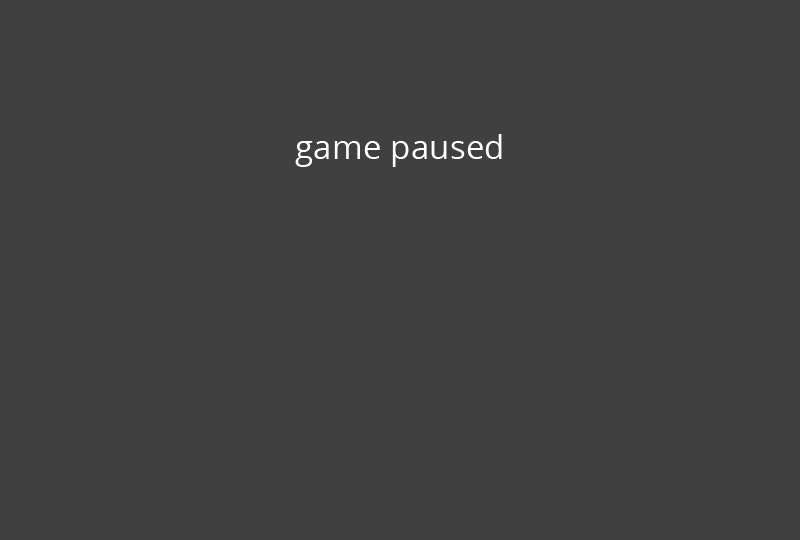
<style>
.page{position:relative;width:800px;height:540px;background:#404040}
.page>*{position:absolute;margin:0}
.t1{font:33.3px "OpenSans";color:#ffffff}
</style>
<div class="page">
<p class="t1" style="left:295px;top:134px;width:207px;height:33px">game paused</p>
</div>
